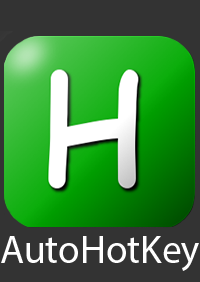
<style>
.page{position:relative;width:200px;height:282px;background:#333333}
.page>*{position:absolute;margin:0}
.t1{font:39.6px "MyriadPro-Regular";color:#ffffff}
</style>
<div class="page">
<p class="t1" style="left:1px;top:236px;width:198px;height:35px">AutoHotKey</p>
</div>
